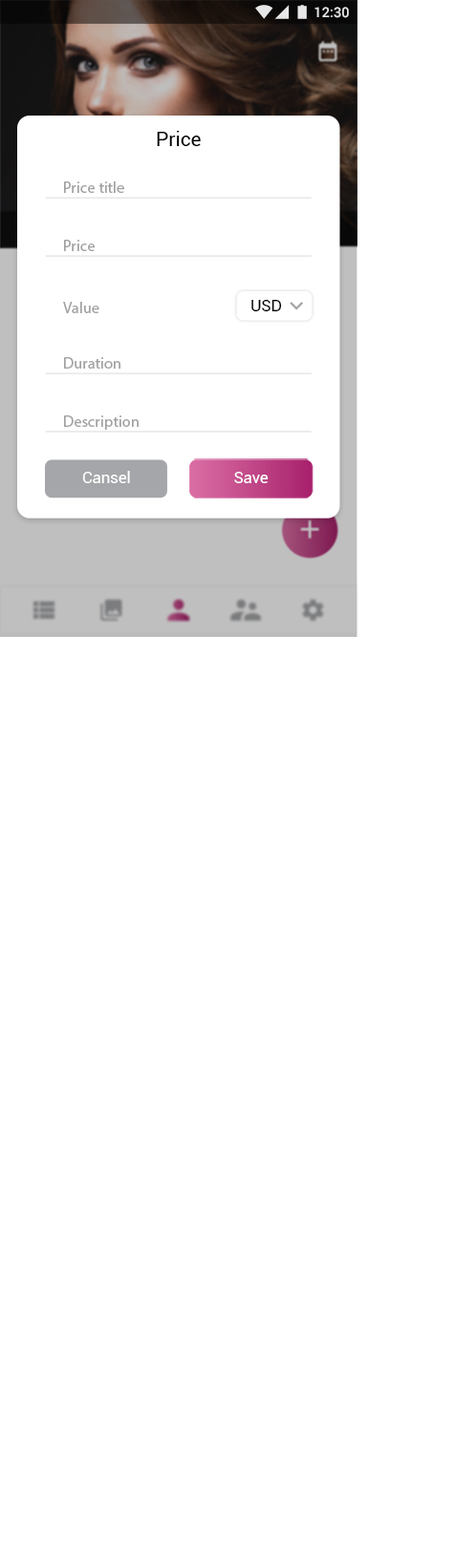
<style>
.page{position:relative;width:455px;height:1568px;background:#ffffff}
.page>*{position:absolute;margin:0}
.t1{font:13.9px "Roboto-Medium";color:#ffffff}
.t2{font:19.8px "Roboto-Regular";color:#000000}
.t3{font:15.8px "MyriadPro-Regular";color:#a1a1a1}
.t4{font:15.8px "Roboto-Regular";color:#000000}
.t5{font:15.8px "Roboto-Regular";color:#ffffff}
</style>
<div class="page">
<p class="t1" style="left:314px;top:7px;width:35px;height:11px">12:30</p>
<p class="t2" style="left:157px;top:131px;width:44px;height:15px">Price</p>
<p class="t3" style="left:64px;top:181px;width:60px;height:12px">Price title</p>
<p class="t3" style="left:64px;top:240px;width:31px;height:11px">Price</p>
<p class="t3" style="left:63px;top:302px;width:36px;height:11px">Value</p>
<p class="t4" style="left:251px;top:300px;width:31px;height:11px">USD</p>
<p class="t3" style="left:64px;top:357px;width:56px;height:12px">Duration</p>
<p class="t3" style="left:64px;top:415px;width:74px;height:15px">Description</p>
<p class="t5" style="left:82px;top:471px;width:48px;height:12px">Cansel</p>
<p class="t5" style="left:234px;top:472px;width:34px;height:11px">Save</p>
</div>
